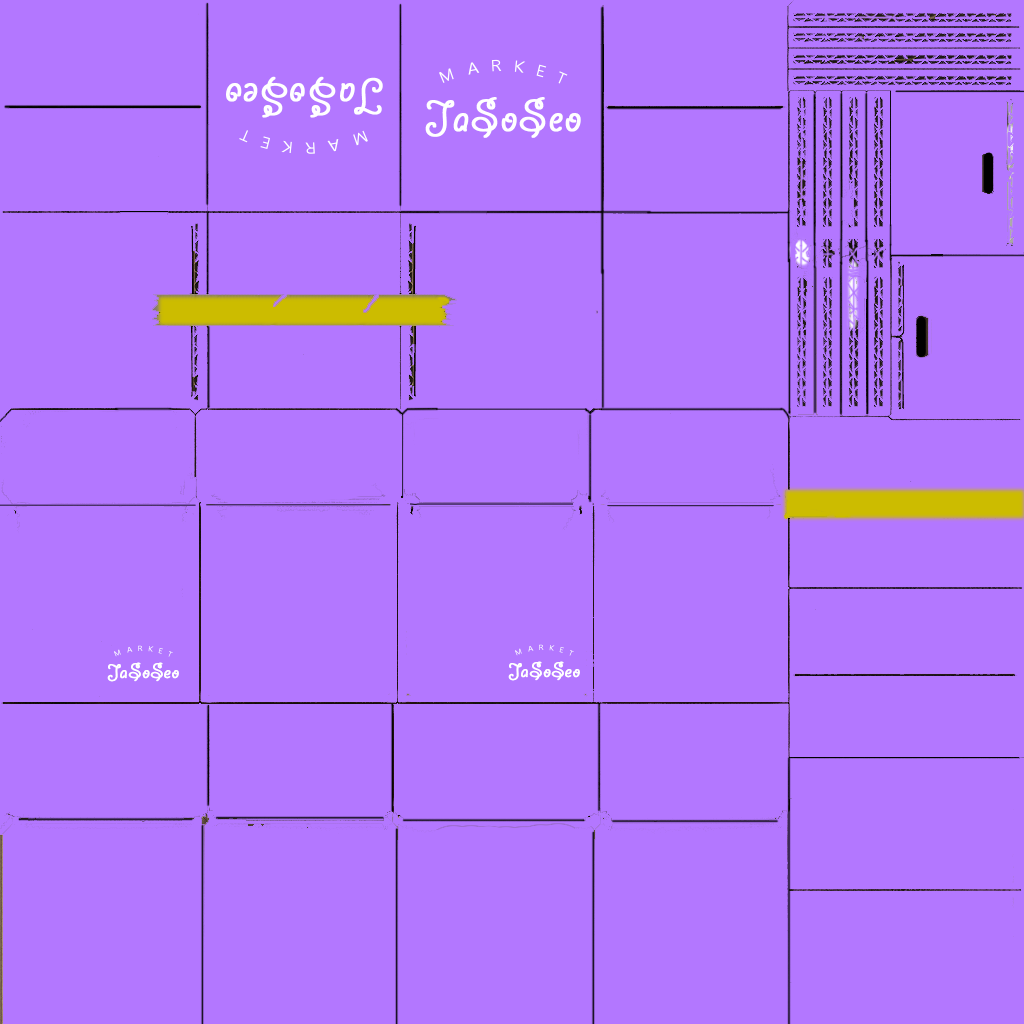
<style>
.page{position:relative;width:1024px;height:1024px;background:#b377ff}
.page>*{position:absolute;margin:0}
.t1{font:15.1px "MicrosoftTaiLe";letter-spacing:0.8em;color:#ffffff}
.t2{font:48.2px "GiddyupStd";letter-spacing:0.02em;color:#ffffff;font-weight:bold}
.t3{font:48.3px "GiddyupStd";letter-spacing:0.02em;color:#ffffff;font-weight:bold}
.t4{font:6.9px "MicrosoftTaiLe";letter-spacing:0.8em;color:#ffffff}
.t5{font:22.1px "GiddyupStd";letter-spacing:0.02em;color:#ffffff;font-weight:bold}
</style>
<div class="page">
<p class="t1" style="left:439px;top:59px;width:129px;height:25px;rotate:3deg">MARKET</p>
<p class="t2" style="left:226px;top:76px;width:157px;height:42px;rotate:180deg">JaSoSeo</p>
<p class="t3" style="left:425px;top:97px;width:156px;height:41px">JaSoSeo</p>
<p class="t1" style="left:239px;top:130px;width:129px;height:24px;rotate:-177deg">MARKET</p>
<p class="t4" style="left:113px;top:645px;width:60px;height:12px;rotate:3deg">MARKET</p>
<p class="t4" style="left:514px;top:644px;width:60px;height:12px;rotate:3deg">MARKET</p>
<p class="t5" style="left:107px;top:662px;width:72px;height:20px">JaSoSeo</p>
<p class="t5" style="left:508px;top:661px;width:72px;height:20px">JaSoSeo</p>
</div>
